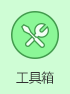
<style>
.page{position:relative;width:70px;height:94px;background:#cffdd5}
.page>*{position:absolute;margin:0}
.t1{font:13px "MicrosoftYaHei";color:#323232}
</style>
<div class="page">
<p class="t1" style="left:16px;top:71px;width:38px;height:13px">工具箱</p>
</div>
